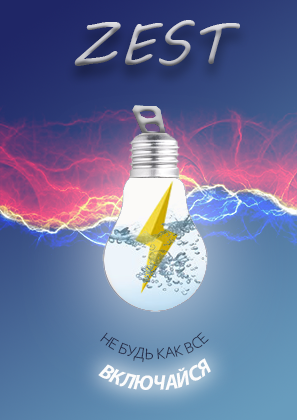
<style>
.page{position:relative;width:297px;height:420px}
.page>*{position:absolute;margin:0}
.t1{font:59px "MVBoli"}
.t2{font:15.9px "CorbelLight"}
.t3{font:21.2px "MyriadPro-BoldIt";color:#fcfcfc}
</style>
<div class="page">
<p class="t1" style="left:74px;top:20px;width:166px;height:46px">ZEST</p>
<p class="t2" style="left:100px;top:332px;width:109px;height:31px">НЕ БУДЬ КАК ВСЕ</p>
<p class="t3" style="left:98px;top:358px;width:113px;height:32px">ВКЛЮЧАЙСЯ</p>
</div>
